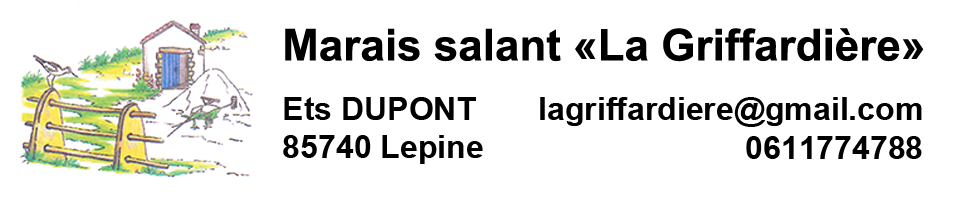
<style>
.page{position:relative;width:960px;height:200px;background:#ffffff}
.page>*{position:absolute;margin:0}
.t1{font:44px "Arial-BoldMT";color:#000000}
.t2{font:32px "Arial-BoldMT";color:#000000}
</style>
<div class="page">
<p class="t1" style="left:285px;top:28px;width:639px;height:34px">Marais salant «La Griffardière»</p>
<p class="t2" style="left:283px;top:97px;width:200px;height:67px">Ets DUPONT<br>85740 Lepine</p>
<p class="t2" style="left:540px;top:97px;width:382px;height:62px;text-align:right">lagriffardiere@gmail.com<br>0611774788</p>
</div>
